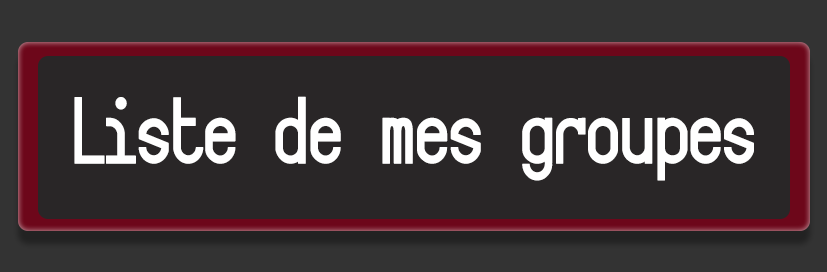
<style>
.page{position:relative;width:827px;height:272px;background:#292627}
.page>*{position:absolute;margin:0}
.t1{font:83.3px "Targa";color:#ffffff;scale:0.9 1}
</style>
<div class="page">
<p class="t1" style="left:74px;top:96px;width:680px;height:85px">Liste de mes groupes</p>
</div>
